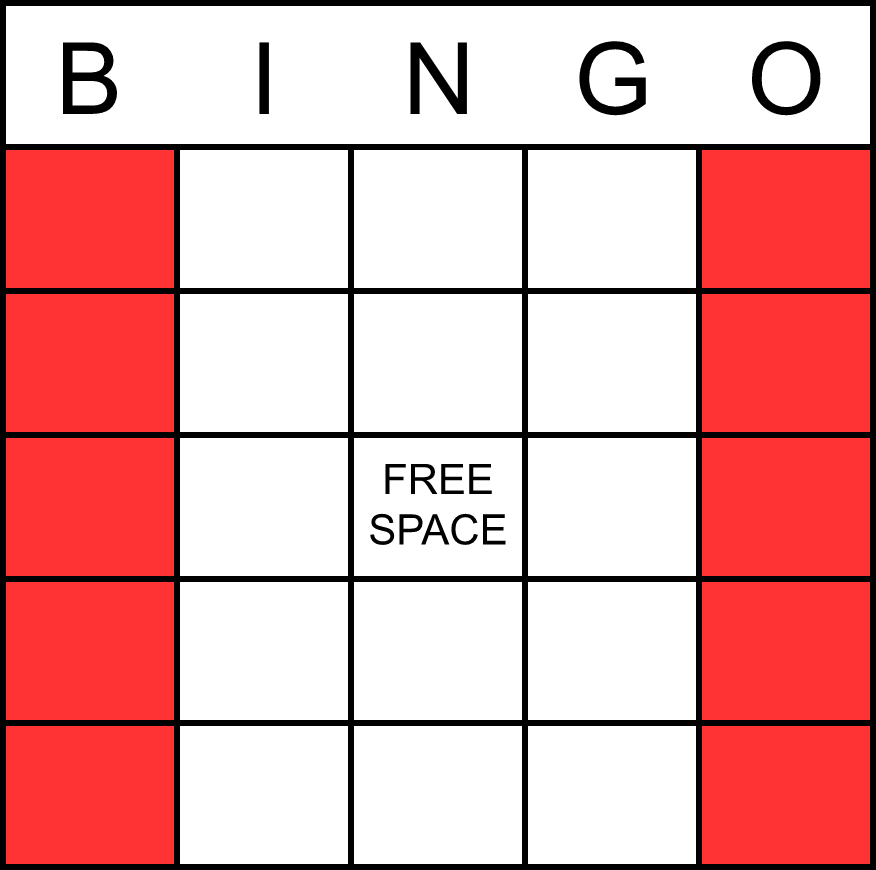
<style>
.page{position:relative;width:876px;height:870px;background:#ffffff}
.page>*{position:absolute;margin:0}
.t1{font:100px "ArialMT";color:#000000}
.t2{font:42px "ArialMT";color:#000000}
</style>
<div class="page">
<p class="t1" style="left:579px;top:41px;width:67px;height:75px">G</p>
<p class="t1" style="left:751px;top:41px;width:70px;height:75px">O</p>
<p class="t1" style="left:62px;top:42px;width:56px;height:72px">B</p>
<p class="t1" style="left:259px;top:42px;width:10px;height:72px">I</p>
<p class="t1" style="left:410px;top:42px;width:57px;height:72px">N</p>
<p class="t2" style="left:370px;top:463px;width:136px;height:82px;text-align:center">FREE<br>SPACE</p>
</div>
